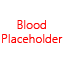
<style>
.page{position:relative;width:64px;height:64px;background:#ffffff}
.page>*{position:absolute;margin:0}
.t1{font:12px "SegoeUI-Light";letter-spacing:0.02em;color:#ff0000}
</style>
<div class="page">
<p class="t1" style="left:2px;top:20px;width:61px;height:23px;text-align:center">Blood<br>Placeholder</p>
</div>
